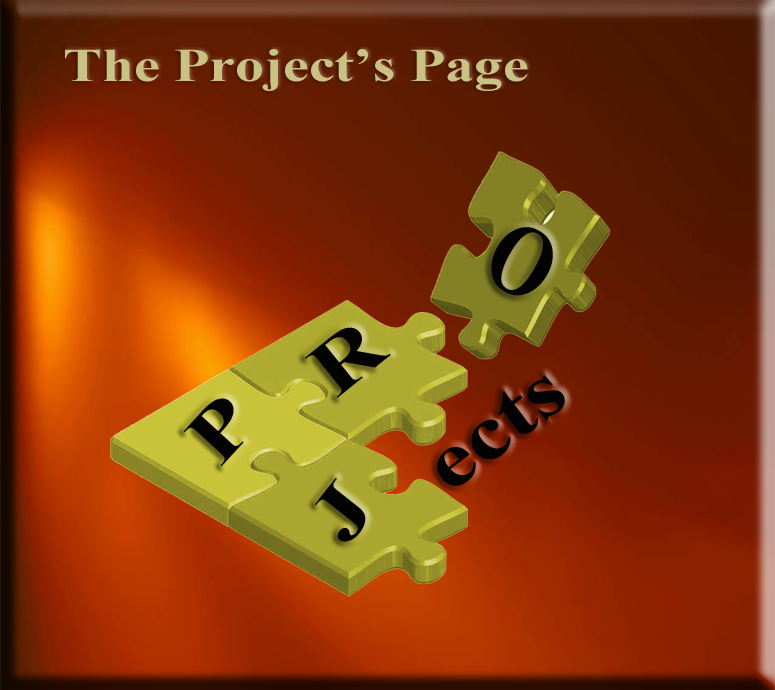
<style>
.page{position:relative;width:775px;height:690px}
.page>*{position:absolute;margin:0}
.t1{font:47px "TimesNewRomanPS-BoldMT";color:#cac282;scale:1.23 1}
.t2{font:101.6px "TimesNewRomanPS-BoldMT";color:#030303;scale:0.8 1}
.t3{font:78px "TimesNewRomanPS-BoldMT";color:#030303;scale:1.23 1}
</style>
<div class="page">
<p class="t1" style="left:65px;top:49px;width:463px;height:42px">The Project’s Page</p>
<p class="t2" style="left:491px;top:227px;width:62px;height:69px;rotate:29deg">O</p>
<p class="t3" style="left:305px;top:327px;width:86px;height:71px;rotate:-39deg">R</p>
<p class="t3" style="left:437px;top:375px;width:128px;height:111px;rotate:-37deg">ects</p>
<p class="t3" style="left:183px;top:398px;width:61px;height:69px;rotate:-47deg">P</p>
<p class="t3" style="left:315px;top:477px;width:51px;height:65px;rotate:-52deg">J</p>
</div>
